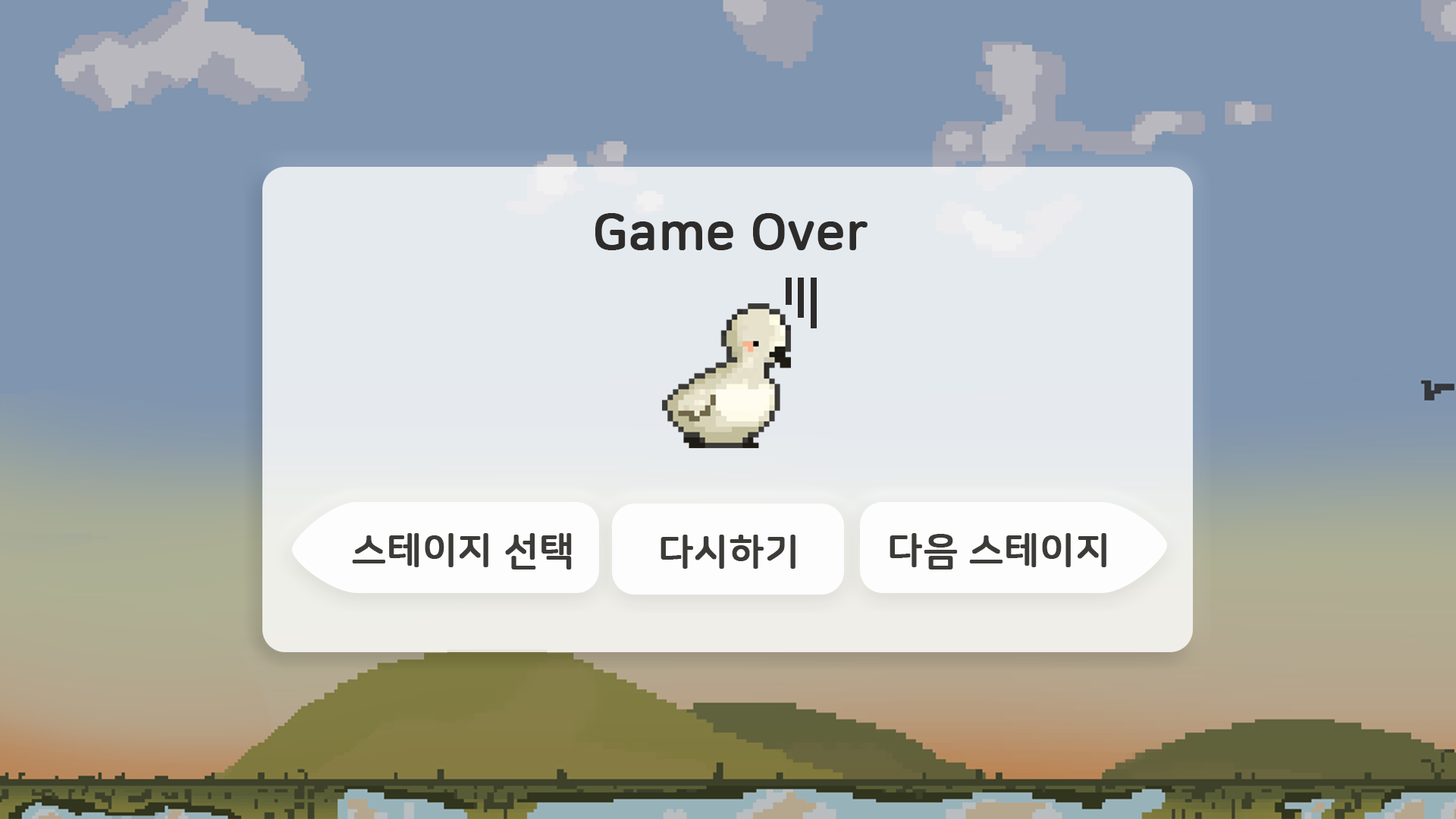
<style>
.page{position:relative;width:1456px;height:819px;background:#7f95b0}
.page>*{position:absolute;margin:0}
.t1{font:50.6px "NanumSquareRoundB";color:#2d2c2b;font-weight:bold}
.t2{font:37.9px "NanumSquareRoundB";color:#3c3b38;font-weight:bold}
</style>
<div class="page">
<p class="t1" style="left:595px;top:213px;width:273px;height:37px">Game Over</p>
<p class="t2" style="left:352px;top:533px;width:220px;height:37px">스테이지 선택</p>
<p class="t2" style="left:890px;top:533px;width:216px;height:37px">다음 스테이지</p>
<p class="t2" style="left:660px;top:535px;width:135px;height:34px">다시하기</p>
</div>
